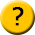
<style>
.page{position:relative;width:35px;height:35px;background:#ffc501}
.page>*{position:absolute;margin:0}
.t1{font:23.8px "Verdana";color:#000000;font-weight:bold}
</style>
<div class="page">
<p class="t1" style="left:12px;top:7px;width:12px;height:19px">?</p>
</div>
